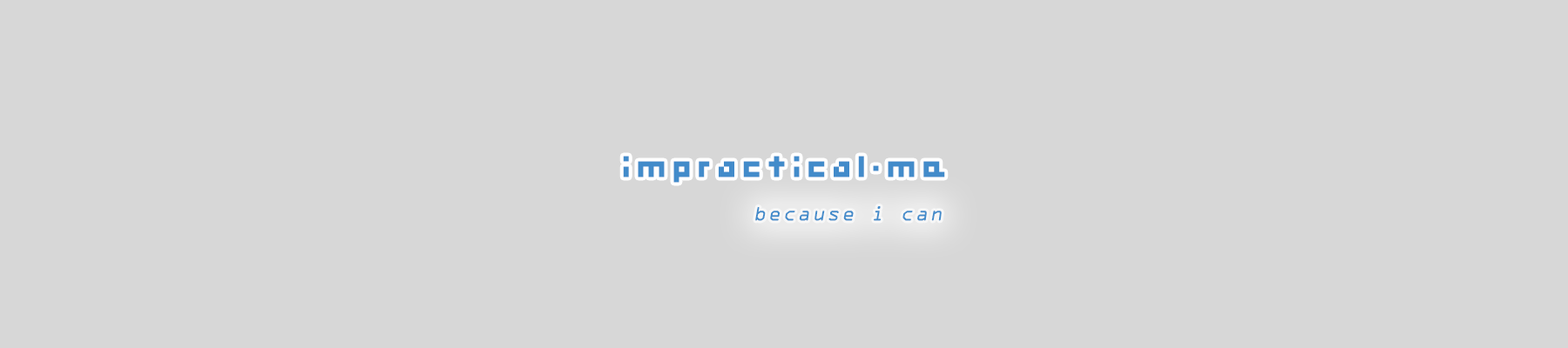
<style>
.page{position:relative;width:1568px;height:348px;background:#d7d7d7}
.page>*{position:absolute;margin:0}
.t1{font:41.8px "Hooge0455";letter-spacing:0.1em;color:#428bca}
.t2{font:20.9px "OCRAExtended";letter-spacing:0.1em;color:#428bca;font-style:italic}
</style>
<div class="page">
<p class="t1" style="left:623px;top:156px;width:322px;height:27px">impractical.me</p>
<p class="t2" style="left:755px;top:206px;width:187px;height:15px">because i can</p>
</div>
